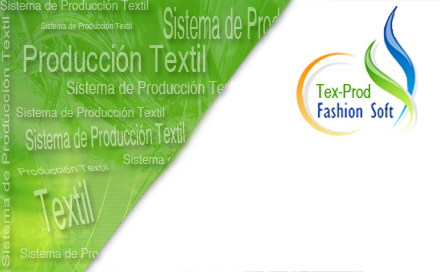
<style>
.page{position:relative;width:440px;height:272px;background:#ffffff}
.page>*{position:absolute;margin:0}
.t1{font:14px "Helsinki-Narrow";color:#9fca81}
.t2{font:9.7px "Helsinki-Narrow";color:#afd390;scale:2.45 1}
.t3{font:8.6px "Helsinki-Narrow";color:#a7d28a}
.t4{font:14px "Helsinki-Narrow";color:#b2d496}
.t5{font:28.3px "Helsinki-Narrow";color:#b6d89b;scale:0.53 1}
</style>
<div class="page">
<p class="t1" style="left:0px;top:0px;width:149px;height:10px">Sistema de Producción Textil</p>
<p class="t2" style="left:2px;top:16px;width:8px;height:251px;rotate:-90deg">Sistema de Producción Textil</p>
<p class="t3" style="left:41px;top:22px;width:91px;height:7px">Sistema de Producción Textil</p>
<p class="t4" style="left:16px;top:107px;width:149px;height:10px">Sistema de Producción Textil</p>
<p class="t5" style="left:25px;top:121px;width:160px;height:30px;rotate:-3deg">Sistema de Producción Textil</p>
</div>
